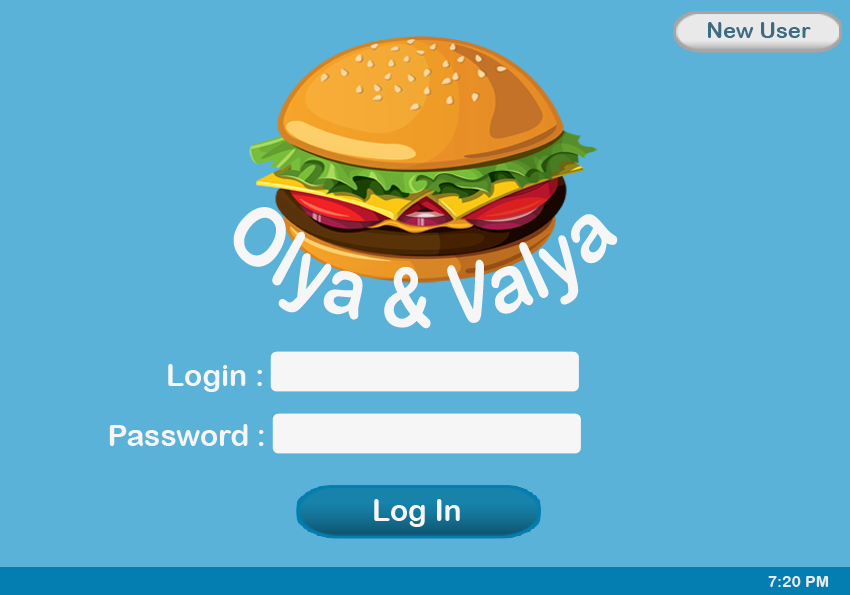
<style>
.page{position:relative;width:850px;height:595px;background:#5ab2d9}
.page>*{position:absolute;margin:0}
.t1{font:22px "ArialRoundedMTBold";color:#3d6c80}
.t2{font:60px "ArialRoundedMTBold";color:#f7f6f6}
.t3{font:30px "ArialRoundedMTBold";color:#f7f6f6}
.t4{font:16px "ArialRoundedMTBold";color:#e9e9e9}
</style>
<div class="page">
<p class="t1" style="left:708px;top:22px;width:103px;height:16px">New User</p>
<p class="t2" style="left:233px;top:207px;width:385px;height:122px">Olya &amp; Valya</p>
<p class="t3" style="left:168px;top:364px;width:94px;height:28px">Login :</p>
<p class="t3" style="left:109px;top:424px;width:155px;height:22px">Password :</p>
<p class="t3" style="left:374px;top:499px;width:86px;height:28px">Log In</p>
<p class="t4" style="left:768px;top:576px;width:61px;height:11px">7:20 PM</p>
</div>
